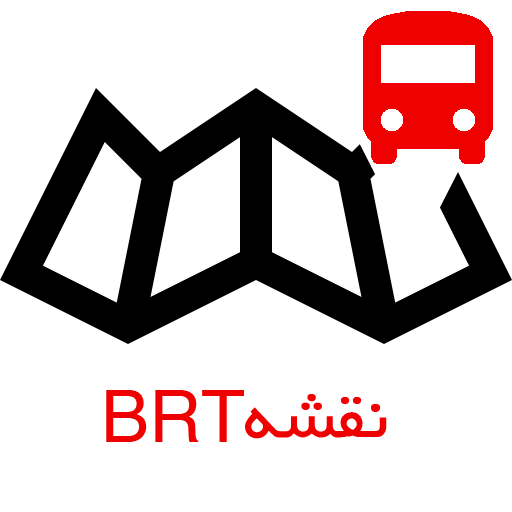
<style>
.page{position:relative;width:512px;height:512px;background:#ffffff}
.page>*{position:absolute;margin:0}
.t1{font:72px "BYekan+";color:#ef0101}
</style>
<div class="page">
<p class="t1" style="left:106px;top:390px;width:138px;height:52px">BRT</p>
<p class="t1" style="left:245px;top:394px;width:142px;height:45px">نقشه</p>
</div>
